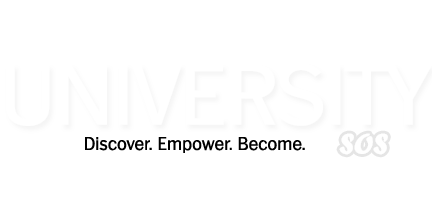
<style>
.page{position:relative;width:432px;height:216px;background:#ffffff}
.page>*{position:absolute;margin:0}
.t1{font:18px "Plymouth-Serial-Regular";color:#000000}
.t2{font:29.5px "ForteMT";color:#ffffff}
</style>
<div class="page">
<p class="t1" style="left:85px;top:137px;width:220px;height:16px">Discover. Empower. Become.</p>
<p class="t2" style="left:339px;top:133px;width:49px;height:22px">SOS</p>
</div>
